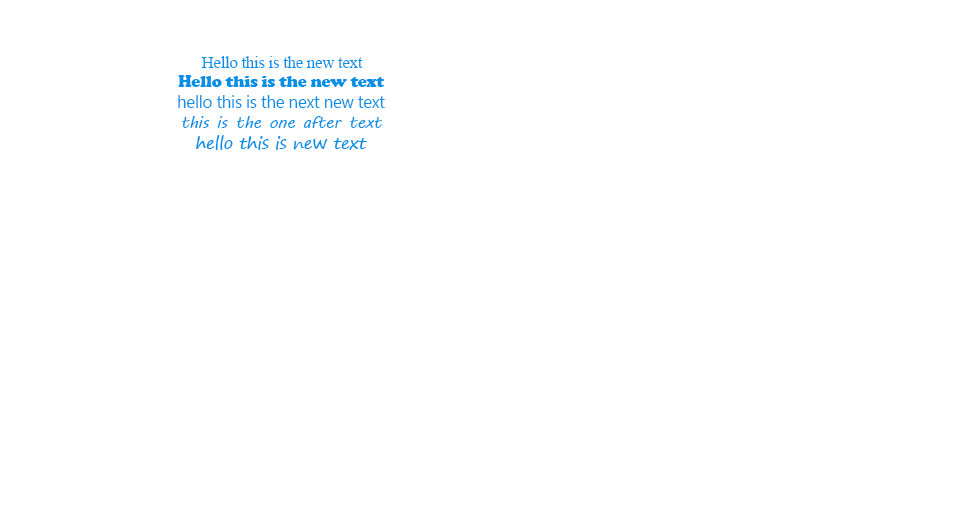
<style>
.page{position:relative;width:953px;height:520px;background:#ffffff}
.page>*{position:absolute;margin:0}
.t1{font:17px "TimesNewRomanPSMT";letter-spacing:-0.02em;color:#0490e6}
.t2{font:17px "MicrosoftNewTaiLue";letter-spacing:-0.02em;color:#0490e6}
.t3{font:17px "CooperBlack";letter-spacing:-0.02em;color:#0490e6}
.t4{font:17px "MVBoli";letter-spacing:-0.02em;color:#0490e6}
.t5{font:17px "SegoePrint";letter-spacing:-0.02em;color:#0490e6}
</style>
<div class="page">
<p class="t1" style="left:201px;top:56px;width:162px;height:12px">Hello this is the new text</p>
<p class="t2" style="left:178px;top:75px;width:207px;height:75px;text-align:center"><span class="t3">Hello this is the new text<br></span>hello this is the next new text<br><span class="t4">this is the one after text<br></span><span class="t5">hello this is new text</span></p>
</div>
